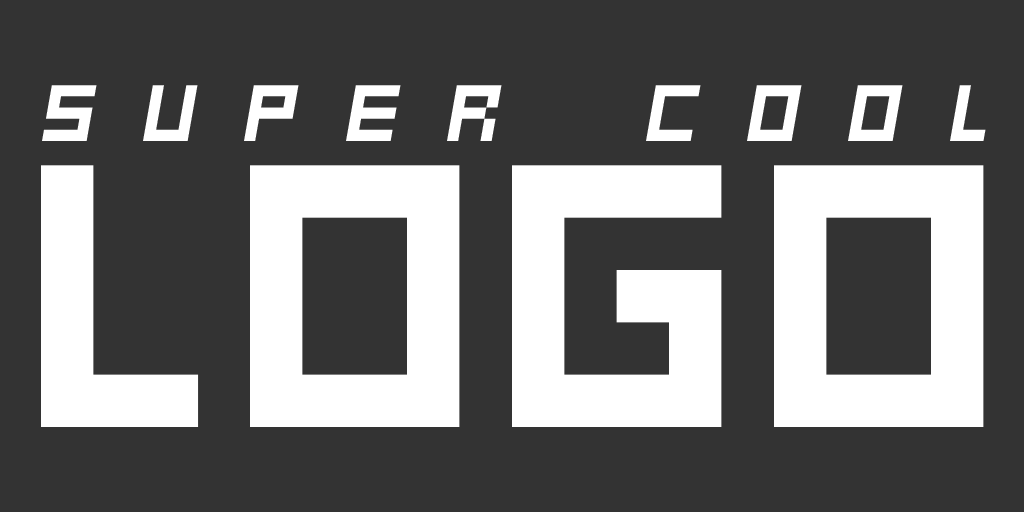
<style>
.page{position:relative;width:1024px;height:512px;background:#333333}
.page>*{position:absolute;margin:0}
.t1{font:127.5px "Kenney-Mini-Square";letter-spacing:0.511em;color:#ffffff;font-variant:small-caps;font-style:italic}
.t2{font:418.7px "Kenney-Mini-Square";color:#ffffff;font-variant:small-caps}
</style>
<div class="page">
<p class="t1" style="left:42px;top:85px;width:944px;height:56px">super cool</p>
<p class="t2" style="left:41px;top:165px;width:943px;height:262px">LOGO</p>
</div>
